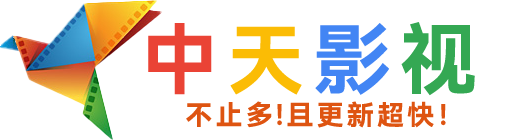
<style>
.page{position:relative;width:520px;height:140px;background:#ffffff}
.page>*{position:absolute;margin:0}
.t1{font:77px "HarmonyOS_Sans_SC_Bold";letter-spacing:0.12em;color:#ea4335;text-transform:uppercase}
.t2{font:77px "HarmonyOS_Sans_SC_Bold";letter-spacing:0.12em;color:#fbbc05;text-transform:uppercase}
.t3{font:77px "HarmonyOS_Sans_SC_Bold";letter-spacing:0.12em;color:#4285f4;text-transform:uppercase}
.t4{font:77px "HarmonyOS_Sans_SC_Bold";letter-spacing:0.12em;color:#34a853;text-transform:uppercase}
.t5{font:27px "HarmonyOS_Sans_SC_Bold";letter-spacing:0.12em;color:#de5411;text-transform:uppercase}
</style>
<div class="page">
<p class="t1" style="left:148px;top:22px;width:327px;height:74px">中<span class="t2">天</span><span class="t3">影</span><span class="t4">视</span></p>
<p class="t5" style="left:186px;top:101px;width:260px;height:27px">不止多!且更新超快！</p>
</div>
